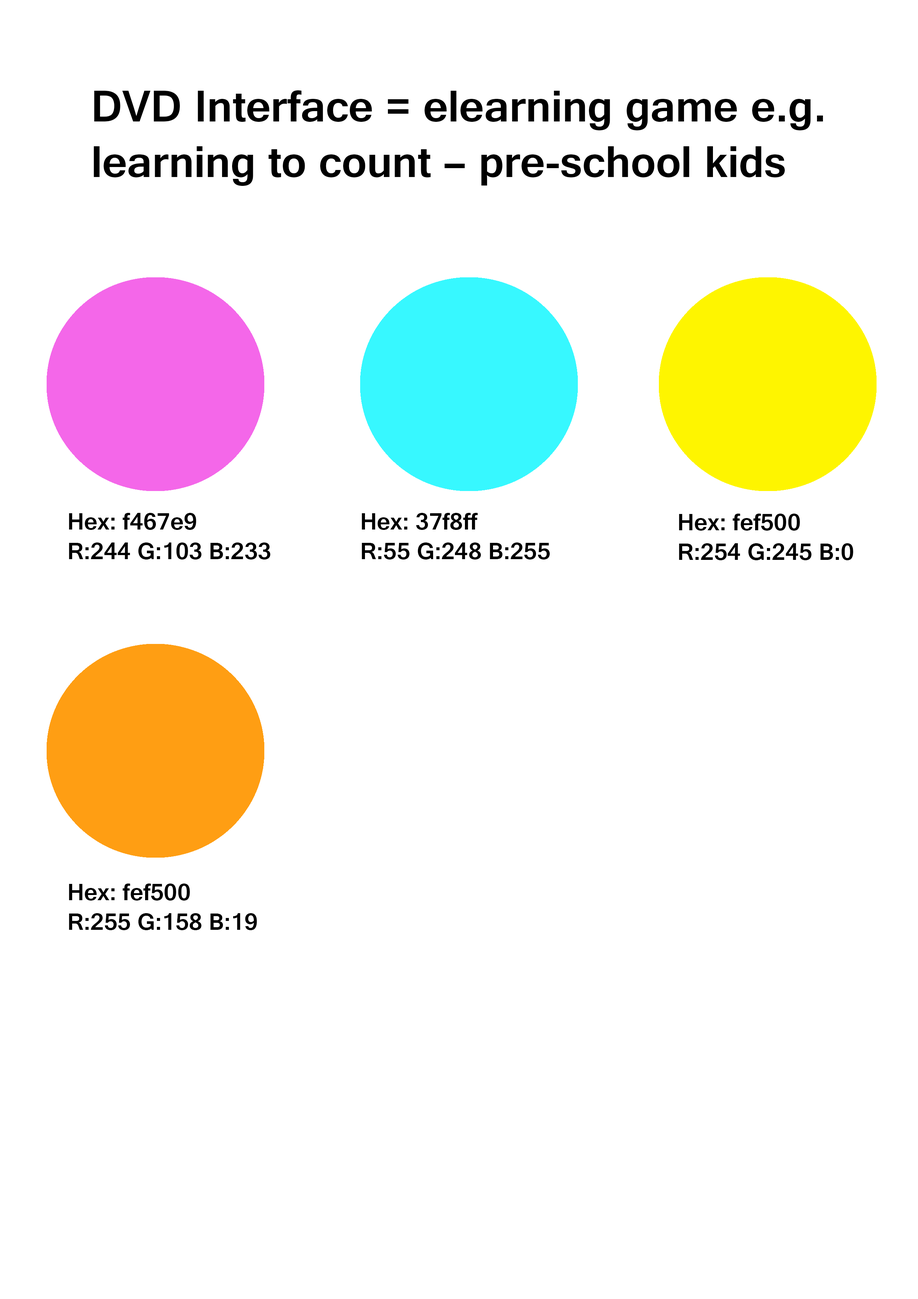
<style>
.page{position:relative;width:918px;height:1299px;background:#ffffff}
.page>*{position:absolute;margin:0}
.t1{font:46.3px "Gautami-Bold";color:#000000}
.t2{font:24.7px "Gautami-Bold";color:#000000}
</style>
<div class="page">
<p class="t1" style="left:94px;top:90px;width:729px;height:96px">DVD Interface = elearning game e.g. learning to count – pre-school kids</p>
<p class="t2" style="left:69px;top:513px;width:202px;height:46px">Hex: f467e9<br>R:244 G:103 B:233</p>
<p class="t2" style="left:362px;top:513px;width:188px;height:46px">Hex: 37f8ff<br>R:55 G:248 B:255</p>
<p class="t2" style="left:679px;top:513px;width:174px;height:47px">Hex: fef500<br>R:254 G:245 B:0</p>
<p class="t2" style="left:69px;top:883px;width:188px;height:47px">Hex: fef500<br>R:255 G:158 B:19</p>
</div>
